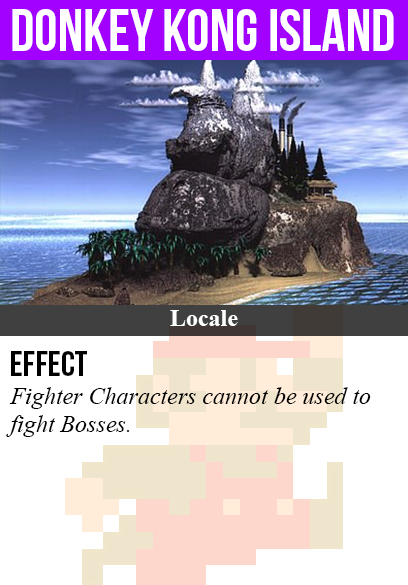
<style>
.page{position:relative;width:408px;height:585px;background:#ffffff}
.page>*{position:absolute;margin:0}
.t1{font:60px "BebasNeue";color:#ffffff}
.t2{font:24px "TimesNewRomanPS-BoldMT";color:#ffffff}
.t3{font:36px "BebasNeue";color:#000000}
.t4{font:24px "TimesNewRomanPS-ItalicMT";color:#000000}
</style>
<div class="page">
<p class="t1" style="left:12px;top:9px;width:382px;height:42px">donkey kong island</p>
<p class="t2" style="left:170px;top:310px;width:68px;height:16px">Locale</p>
<p class="t3" style="left:11px;top:351px;width:76px;height:25px">Effect</p>
<p class="t4" style="left:6px;top:387px;width:365px;height:50px">Fighter Characters cannot be used to<br>fight Bosses.</p>
</div>
